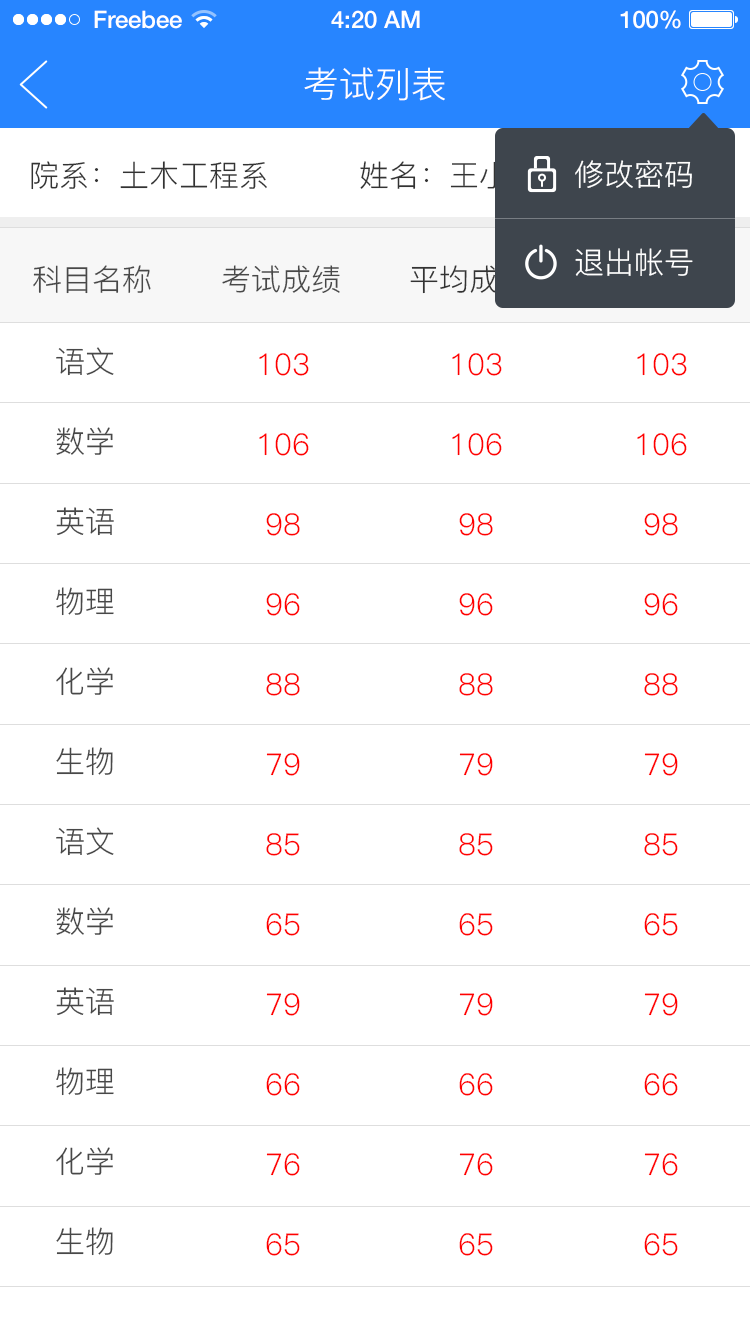
<style>
.page{position:relative;width:750px;height:1336px;background:#ffffff}
.page>*{position:absolute;margin:0}
.t1{font:24px "HelveticaNeue-Medium";color:#ffffff}
.t2{font:36px "PingFang-SC-Regular";color:#ffffff}
.t3{font:30px "PingFang-SC-Regular";color:#333333}
.t4{font:30px/88px "PingFang-SC-Regular";color:#ffffff}
.t5{font:30px "PingFang-SC-Regular";color:#484848}
.t6{font:30px/80px "PingFang-SC-Regular";color:#484848}
.t7{font:30px/80px "PingFang-SC-Regular";color:#ff0000}
</style>
<div class="page">
<p class="t1" style="left:94px;top:10px;width:88px;height:19px">Freebee</p>
<p class="t1" style="left:331px;top:10px;width:89px;height:19px">4:20 AM</p>
<p class="t1" style="left:620px;top:10px;width:61px;height:19px">100%</p>
<p class="t2" style="left:304px;top:67px;width:141px;height:34px">考试列表</p>
<p class="t3" style="left:31px;top:161px;width:505px;height:29px">院系：土木工程系         姓名：王小明</p>
<p class="t4" style="left:575px;top:160px;width:118px;height:116px">修改密码<br>退出帐号</p>
<p class="t5" style="left:33px;top:265px;width:118px;height:29px">科目名称</p>
<p class="t5" style="left:222px;top:265px;width:118px;height:28px">考试成绩</p>
<p class="t3" style="left:410px;top:265px;width:118px;height:29px">平均成绩</p>
<p class="t6" style="left:56px;top:347px;width:58px;height:909px">语文<br>数学<br>英语<br>物理 <br>化学<br>生物<br>语文<br>数学<br>英语<br>物理 <br>化学<br>生物</p>
<p class="t7" style="left:259px;top:353px;width:50px;height:903px;text-align:center">103<br>106<br>98<br>96<br>88<br>79<br>85<br>65<br>79<br>66<br>76<br>65</p>
<p class="t7" style="left:452px;top:353px;width:50px;height:903px;text-align:center">103<br>106<br>98<br>96<br>88<br>79<br>85<br>65<br>79<br>66<br>76<br>65</p>
<p class="t7" style="left:637px;top:353px;width:50px;height:903px;text-align:center">103<br>106<br>98<br>96<br>88<br>79<br>85<br>65<br>79<br>66<br>76<br>65</p>
</div>
